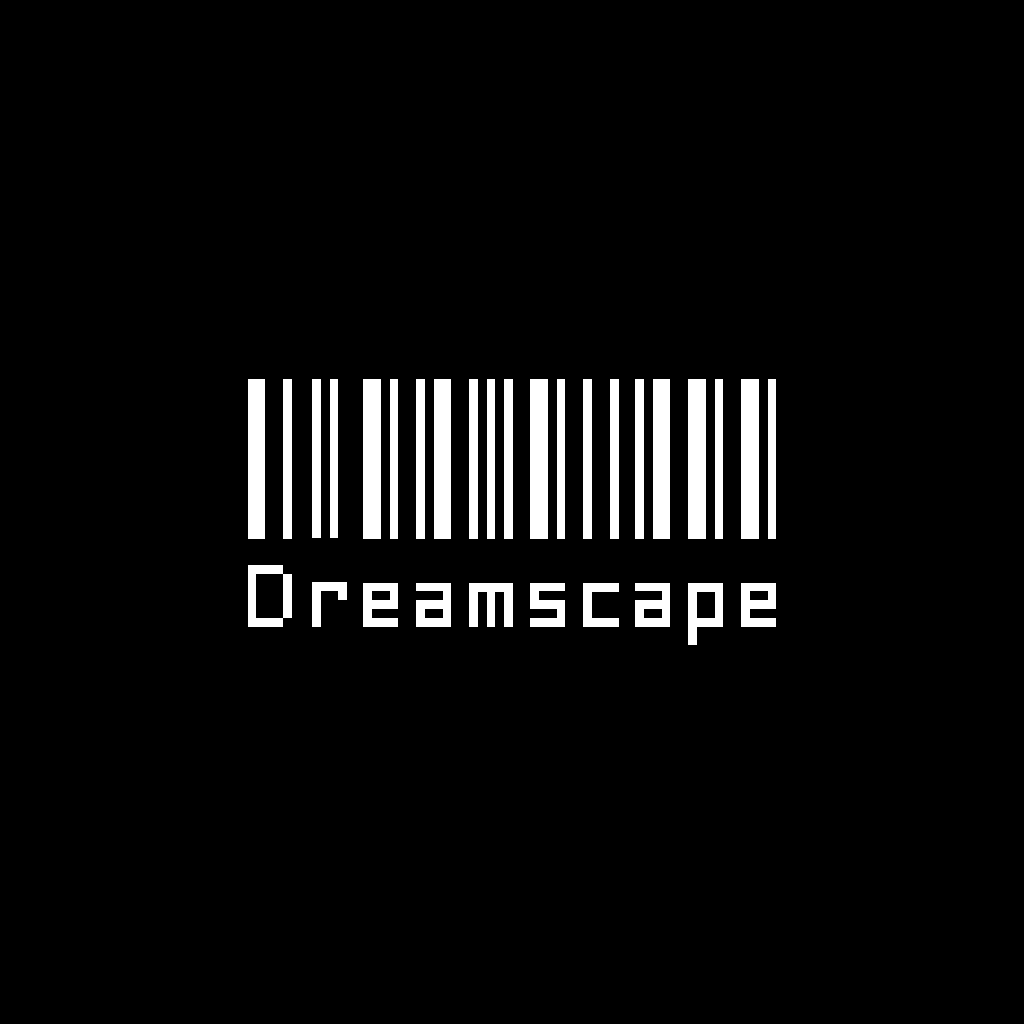
<style>
.page{position:relative;width:1024px;height:1024px;background:#000000}
.page>*{position:absolute;margin:0}
.t1{font:230px "Paskowy";color:#ffffff}
</style>
<div class="page">
<p class="t1" style="left:248px;top:379px;width:528px;height:266px">Dreamscape</p>
</div>
